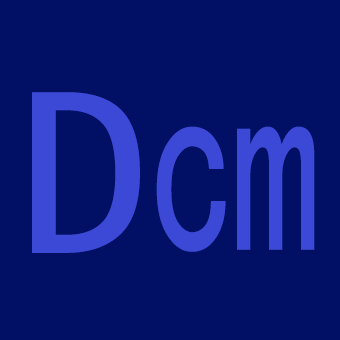
<style>
.page{position:relative;width:340px;height:340px;background:#010f64}
.page>*{position:absolute;margin:0}
.t1{font:240.2px "SimHei";color:#3b49d6;scale:1.08 1}
.t2{font:275.7px "SimHei";color:#3b49d6;scale:0.61 1}
</style>
<div class="page">
<p class="t1" style="left:32px;top:92px;width:108px;height:161px">D</p>
<p class="t2" style="left:156px;top:126px;width:159px;height:126px">cm</p>
</div>
